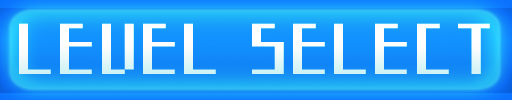
<style>
.page{position:relative;width:512px;height:100px}
.page>*{position:absolute;margin:0}
.t1{font:66.6px "Starcadia";color:#fffefe}
</style>
<div class="page">
<p class="t1" style="left:19px;top:23px;width:471px;height:51px">LEVEL SELECT</p>
</div>
